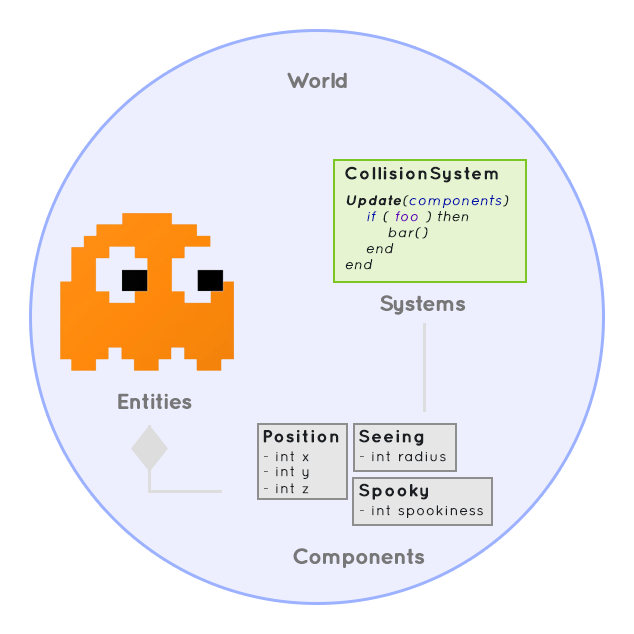
<style>
.page{position:relative;width:634px;height:634px;background:#edefff}
.page>*{position:absolute;margin:0}
.t1{font:37px "Quicksand-Bold";letter-spacing:-0.05em;color:#777777;font-weight:bold}
.t2{font:30px "Quicksand-Bold";letter-spacing:0.05em;color:#1b1f23;font-weight:bold}
.t3{font:24px/16px "Quicksand-Italic";letter-spacing:0.05em;color:#1b1f23;font-weight:bold}
.t4{font:24px/16px "Quicksand-BoldItalic";letter-spacing:0.05em;color:#1b1f23;font-weight:bold}
.t5{font:24px/16px "Quicksand-Italic";letter-spacing:0.05em;color:#0011aa;font-weight:bold}
.t6{font:24px/16px "Quicksand-Italic";letter-spacing:0.05em;color:#6600bb;font-weight:bold}
.t7{font:24px "Quicksand-Regular";letter-spacing:0.05em;color:#1b1f23;font-weight:bold}
</style>
<div class="page">
<p class="t1" style="left:287px;top:72px;width:60px;height:16px">World</p>
<p class="t2" style="left:345px;top:166px;width:153px;height:17px">CollisionSystem</p>
<p class="t3" style="left:345px;top:195px;width:164px;height:75px"><span class="t4">Update</span>(<span class="t5">components</span>)<br>    <span class="t5">if </span>( <span class="t6">foo </span>) then<br>        bar()<br>    end<br>end</p>
<p class="t1" style="left:380px;top:295px;width:86px;height:20px">Systems</p>
<p class="t1" style="left:118px;top:393px;width:74px;height:16px">Entities</p>
<p class="t2" style="left:263px;top:430px;width:76px;height:13px">Position</p>
<p class="t2" style="left:359px;top:429px;width:65px;height:17px">Seeing</p>
<p class="t7" style="left:264px;top:451px;width:45px;height:11px">- int x</p>
<p class="t7" style="left:360px;top:451px;width:86px;height:11px">- int radius</p>
<p class="t7" style="left:264px;top:466px;width:45px;height:13px">- int y</p>
<p class="t7" style="left:264px;top:483px;width:45px;height:11px">- int z</p>
<p class="t2" style="left:359px;top:483px;width:69px;height:17px">Spooky</p>
<p class="t7" style="left:360px;top:505px;width:123px;height:13px">- int spookiness</p>
<p class="t1" style="left:293px;top:548px;width:132px;height:20px">Components</p>
</div>
